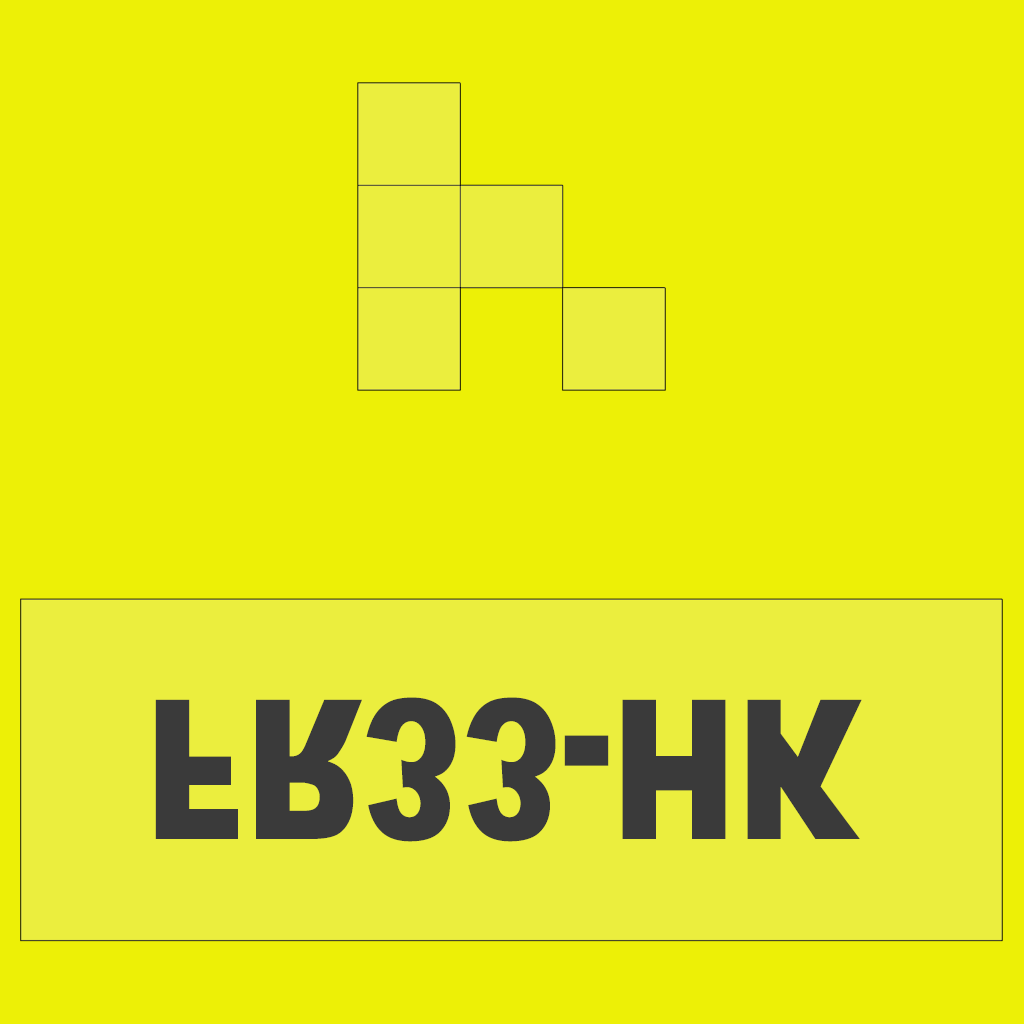
<style>
.page{position:relative;width:1024px;height:1024px;background:#edf006}
.page>*{position:absolute;margin:0}
.t1{font:194.1px "Arial-Black";color:#3a3a3a;scale:0.77 1}
</style>
<div class="page">
<p class="t1" style="left:155px;top:697px;width:707px;height:145px">FR33-HK</p>
</div>
